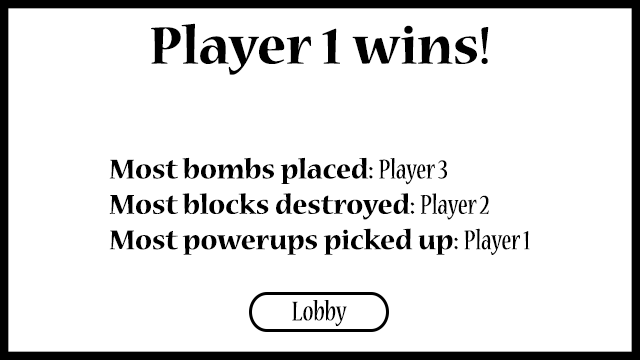
<style>
.page{position:relative;width:640px;height:360px;background:#ffffff}
.page>*{position:absolute;margin:0}
.t1{font:58.3px "NuevaStd-Bold";color:#000000}
.t2{font:30px/17.5px "NuevaStd-Bold";color:#000000}
.t3{font:30px/17.5px "NuevaStd-Cond";color:#000000}
.t4{font:30px "NuevaStd-Cond";color:#000000}
</style>
<div class="page">
<p class="t1" style="left:151px;top:23px;width:338px;height:52px">Player 1 wins!</p>
<p class="t2" style="left:109px;top:157px;width:421px;height:98px">Most bombs placed: <span class="t3">Player 3<br></span>Most blocks destroyed: <span class="t3">Player 2<br></span>Most powerups picked up: <span class="t3">Player 1</span></p>
<p class="t4" style="left:292px;top:300px;width:55px;height:27px">Lobby</p>
</div>
